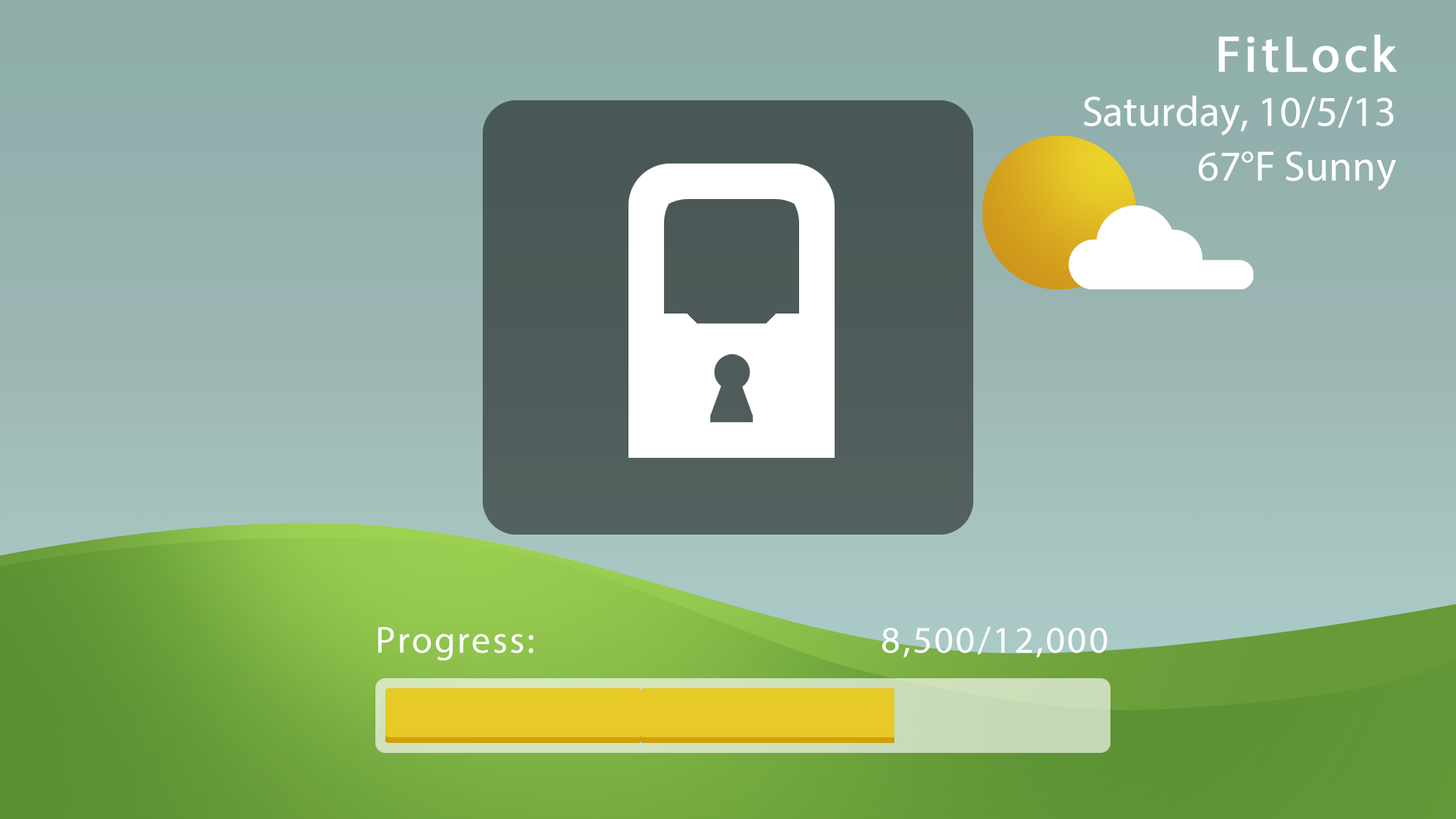
<style>
.page{position:relative;width:1456px;height:819px}
.page>*{position:absolute;margin:0}
.t1{font:42.7px/54.7px "MyriadPro-Regular";color:#ffffff}
.t2{font:51.2px/54.7px "MyriadPro-Regular";letter-spacing:0.06em;color:#ffffff;font-weight:bold}
.t3{font:37.7px "MyriadPro-Regular";letter-spacing:0.06em;color:#ffffff}
</style>
<div class="page">
<p class="t1" style="left:1083px;top:34px;width:314px;height:157px;text-align:right"><span class="t2">FitLock<br></span>Saturday, 10/5/13<br>67°F Sunny</p>
<p class="t3" style="left:378px;top:627px;width:155px;height:33px">Progress:</p>
<p class="t3" style="left:882px;top:626px;width:226px;height:32px">8,500/12,000</p>
</div>
